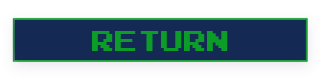
<style>
.page{position:relative;width:321px;height:80px;background:#142953}
.page>*{position:absolute;margin:0}
.t1{font:23.5px "ArcadeNormal";color:#0c9d28}
</style>
<div class="page">
<p class="t1" style="left:92px;top:31px;width:136px;height:20px">return</p>
</div>
